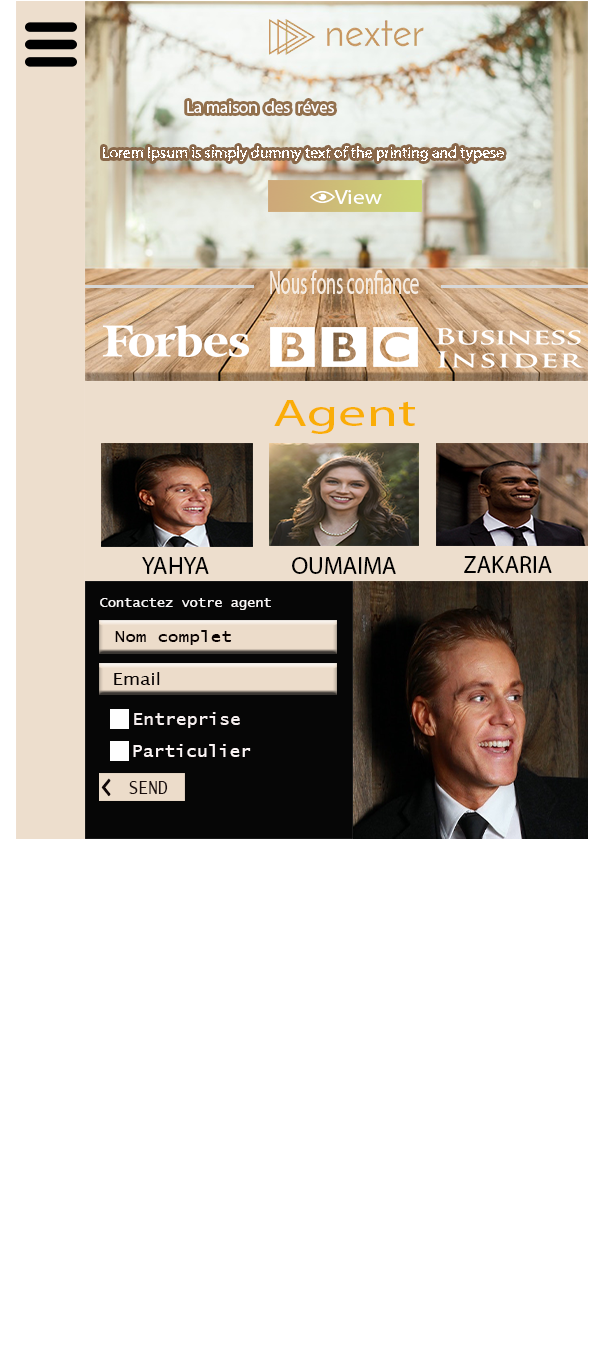
<style>
.page{position:relative;width:600px;height:1366px;background:#ffffff}
.page>*{position:absolute;margin:0}
.t1{font:17px "MyriadPro-Regular";color:#ffffff}
.t2{font:15.7px "MyriadPro-Regular";color:#ffffff}
.t3{font:20.6px "MyriadPro-Regular";color:#ffffff;scale:1.14 1}
.t4{font:33.1px "MyriadPro-Regular";color:#f5ece2;scale:0.54 1}
.t5{font:38px "MyriadPro-Regular";color:#faad07;scale:1.48 1}
.t6{font:24px "MyriadPro-Regular";color:#000000}
.t7{font:14px "LucidaConsole";color:#f8f6f6}
.t8{font:16px "LucidaConsole";color:#090202;scale:1.11 1}
.t9{font:16px "LucidaSans";color:#080303;scale:1.16 1}
.t10{font:16.9px "LucidaConsole";color:#f6efef;scale:1.07 1}
.t11{font:16.9px "LucidaConsole";color:#fcf6f6;scale:1.07 1}
.t12{font:20.2px "LucidaConsole";color:#1a0e0e;scale:0.81 1}
</style>
<div class="page">
<p class="t1" style="left:187px;top:101px;width:147px;height:12px">La maison  des  réves</p>
<p class="t2" style="left:103px;top:146px;width:401px;height:16px">Lorem Ipsum is simply dummy text of the printing and typese</p>
<p class="t3" style="left:334px;top:190px;width:48px;height:14px">View</p>
<p class="t4" style="left:270px;top:270px;width:149px;height:24px">Nous fons confiance</p>
<p class="t5" style="left:274px;top:400px;width:141px;height:34px">Agent</p>
<p class="t6" style="left:142px;top:557px;width:67px;height:17px">YAHYA</p>
<p class="t6" style="left:292px;top:557px;width:104px;height:17px">OUMAIMA</p>
<p class="t6" style="left:464px;top:556px;width:88px;height:17px">ZAKARIA</p>
<p class="t7" style="left:100px;top:598px;width:171px;height:12px">Contactez votre agent</p>
<p class="t8" style="left:115px;top:630px;width:117px;height:15px">Nom complet</p>
<p class="t9" style="left:114px;top:672px;width:46px;height:13px">Email</p>
<p class="t10" style="left:134px;top:712px;width:106px;height:16px">Entreprise</p>
<p class="t11" style="left:133px;top:744px;width:118px;height:13px">Particulier</p>
<p class="t12" style="left:129px;top:781px;width:39px;height:13px">SEND</p>
</div>
